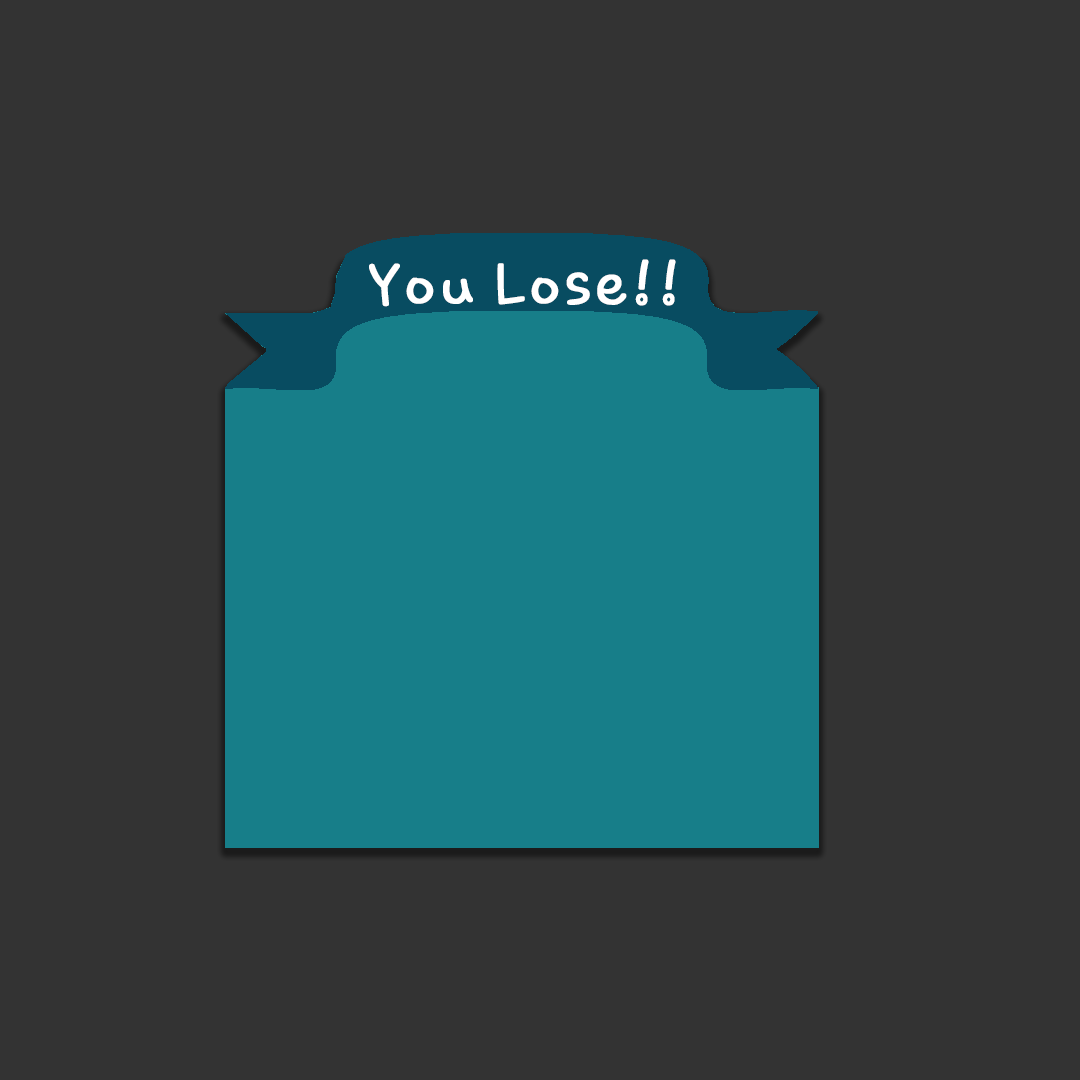
<style>
.page{position:relative;width:1080px;height:1080px;background:#333333}
.page>*{position:absolute;margin:0}
.t1{font:58.3px "Chococooky";letter-spacing:0.06em;color:#ffffff;font-weight:bold}
</style>
<div class="page">
<p class="t1" style="left:369px;top:259px;width:307px;height:48px">You Lose!!</p>
</div>
